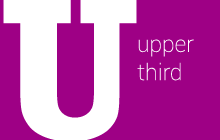
<style>
.page{position:relative;width:220px;height:140px;background:#9e0085}
.page>*{position:absolute;margin:0}
.t1{font:206.2px "Rockwell-Bold";color:#ffffff}
.t2{font:23.5px "Roboto-Thin";color:#ffffff}
</style>
<div class="page">
<p class="t1" style="left:3px;top:0px;width:134px;height:142px">U</p>
<p class="t2" style="left:137px;top:39px;width:57px;height:42px">upper<br>third</p>
</div>
